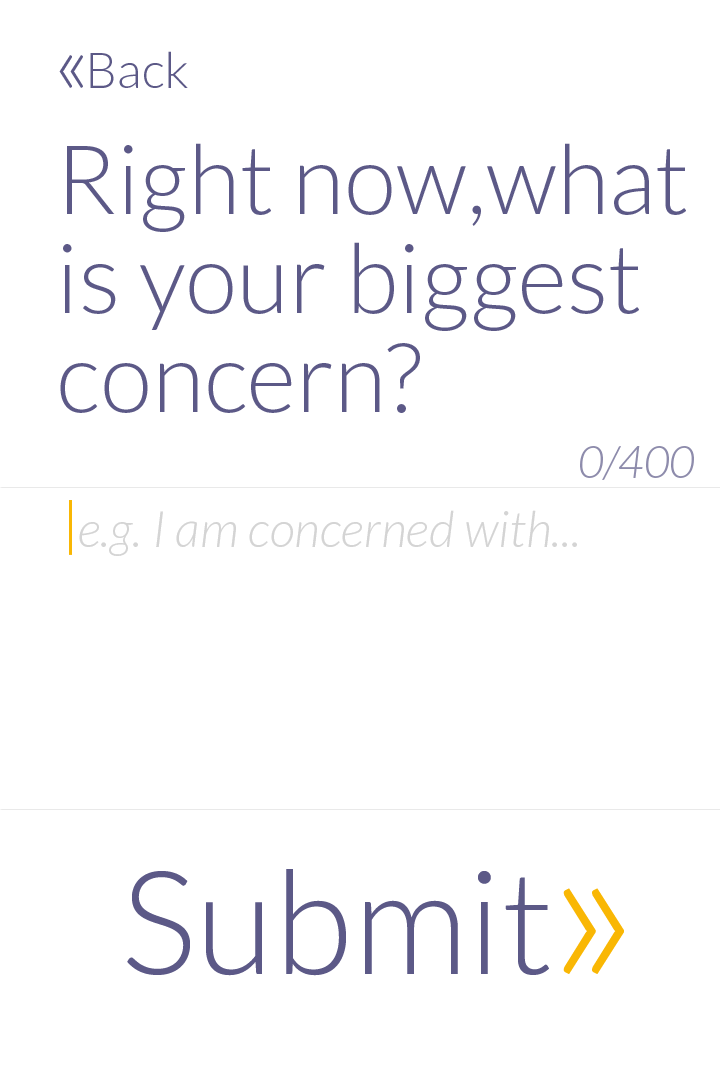
<style>
.page{position:relative;width:720px;height:1080px;background:#ffffff}
.page>*{position:absolute;margin:0}
.t1{font:50px "Lato-Light";color:#5c5987}
.t2{font:86px "Lato-Light";color:#5c5987}
.t3{font:96px/99px "Lato-Light";color:#5c5987}
.t4{font:44px "Lato-LightItalic";color:#8e8cac}
.t5{font:50px "Lato-LightItalic";color:#d4d4d4}
.t6{font:144px "Lato-Light";color:#5c5987}
.t7{font:222px "Lato-Light";color:#f9b704}
</style>
<div class="page">
<p class="t1" style="left:90px;top:51px;width:98px;height:37px">Back</p>
<p class="t2" style="left:59px;top:55px;width:24px;height:33px">«</p>
<p class="t3" style="left:60px;top:143px;width:626px;height:270px">Right now,what <br>is your biggest <br>concern?</p>
<p class="t4" style="left:580px;top:446px;width:114px;height:34px">0/400</p>
<p class="t5" style="left:79px;top:510px;width:498px;height:46px">e.g. I am concerned with...</p>
<p class="t6" style="left:127px;top:869px;width:422px;height:107px">Submit</p>
<p class="t7" style="left:563px;top:888px;width:61px;height:86px">»</p>
</div>
